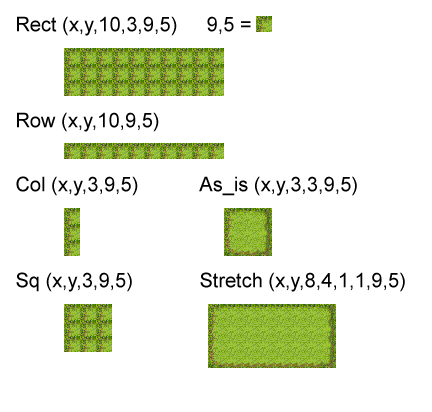
<style>
.page{position:relative;width:432px;height:412px;background:#ffffff}
.page>*{position:absolute;margin:0}
.t1{font:20px "ArialMT";color:#000000}
</style>
<div class="page">
<p class="t1" style="left:17px;top:16px;width:234px;height:20px">Rect (x,y,10,3,9,5)   9,5 =</p>
<p class="t1" style="left:17px;top:112px;width:142px;height:20px">Row (x,y,10,9,5)</p>
<p class="t1" style="left:16px;top:176px;width:122px;height:20px">Col (x,y,3,9,5)</p>
<p class="t1" style="left:199px;top:176px;width:158px;height:20px">As_is (x,y,3,3,9,5)</p>
<p class="t1" style="left:16px;top:272px;width:116px;height:20px">Sq (x,y,3,9,5)</p>
<p class="t1" style="left:200px;top:272px;width:205px;height:20px">Stretch (x,y,8,4,1,1,9,5)</p>
</div>
